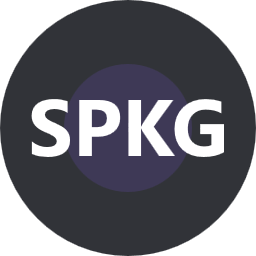
<style>
.page{position:relative;width:256px;height:256px;background:#313338}
.page>*{position:absolute;margin:0}
.t1{font:80px "SegoeUI-Bold";color:#ffffff}
</style>
<div class="page">
<p class="t1" style="left:31px;top:99px;width:193px;height:58px">SPKG</p>
</div>
